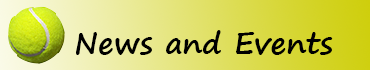
<style>
.page{position:relative;width:370px;height:70px}
.page>*{position:absolute;margin:0}
.t1{font:30px "SegoePrint-Bold";color:#000000}
</style>
<div class="page">
<p class="t1" style="left:76px;top:30px;width:257px;height:25px">News and Events</p>
</div>
